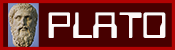
<style>
.page{position:relative;width:175px;height:50px;background:#470000}
.page>*{position:absolute;margin:0}
.t1{font:36px "bitwise";color:#fdf9f9}
</style>
<div class="page">
<p class="t1" style="left:48px;top:12px;width:118px;height:26px">PLATO</p>
</div>
